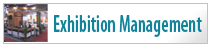
<style>
.page{position:relative;width:211px;height:47px;background:#ffffff}
.page>*{position:absolute;margin:0}
.t1{font:24px "MyriadPro-SemiboldCond";color:#11839a;scale:0.78 1}
</style>
<div class="page">
<p class="t1" style="left:54px;top:15px;width:148px;height:22px">Exhibition Management</p>
</div>
